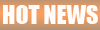
<style>
.page{position:relative;width:100px;height:30px;background:#fefdfc}
.page>*{position:absolute;margin:0}
.t1{font:24px "Impact";color:#fefdfc}
</style>
<div class="page">
<p class="t1" style="left:3px;top:5px;width:95px;height:19px">HOT NEWS</p>
</div>
